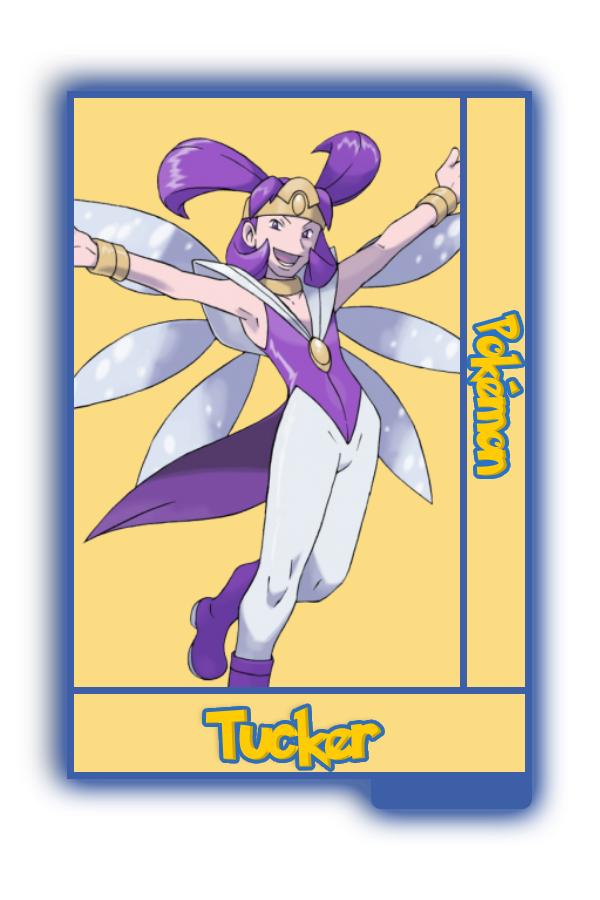
<style>
.page{position:relative;width:600px;height:900px;background:#fbdc83}
.page>*{position:absolute;margin:0}
.t1{font:48.8px "PokemonSolidNormal";color:#ffcb05;scale:0.8 1}
.t2{font:56.6px "PokemonSolidNormal";color:#ffcb05;scale:0.92 1}
</style>
<div class="page">
<p class="t1" style="left:469px;top:313px;width:54px;height:163px;rotate:90deg">Pokémon</p>
<p class="t2" style="left:205px;top:706px;width:177px;height:63px">Tucker</p>
</div>
